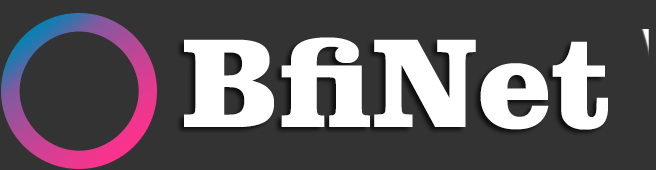
<style>
.page{position:relative;width:656px;height:170px;background:#333333}
.page>*{position:absolute;margin:0}
.t1{font:130px "ClarendonBT-Black";color:#ffffff}
</style>
<div class="page">
<p class="t1" style="left:184px;top:37px;width:424px;height:93px">BfiNet</p>
</div>
